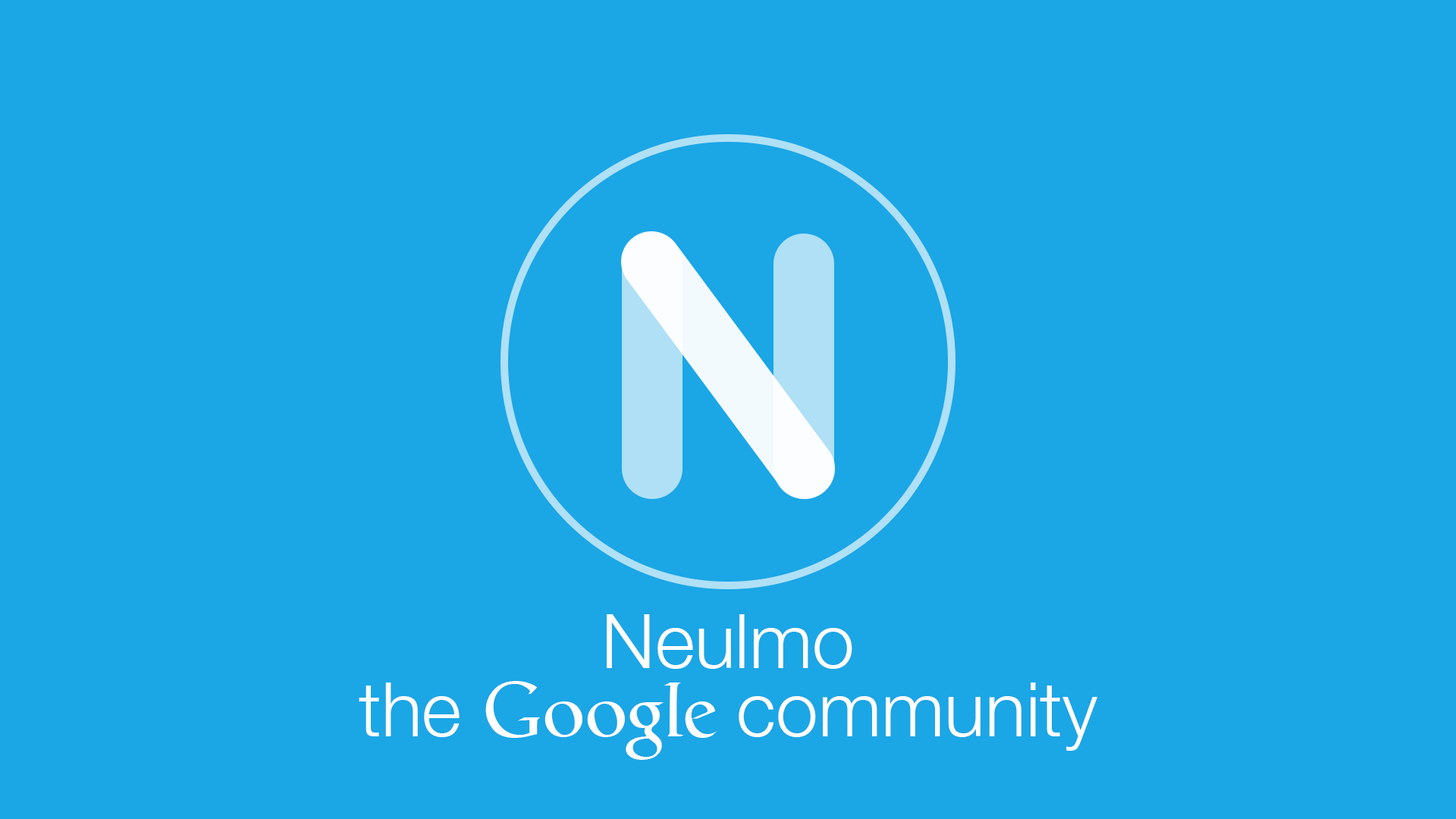
<style>
.page{position:relative;width:1456px;height:819px;background:#1ba6e6}
.page>*{position:absolute;margin:0}
.t1{font:75.8px/68.2px "HelveticaNeue-Light";color:#ffffff}
.t2{font:75.8px/68.2px "Catull-Regular";color:#ffffff}
</style>
<div class="page">
<p class="t1" style="left:359px;top:614px;width:739px;height:146px;text-align:center">Neulmo<br>the <span class="t2">Google </span>community</p>
</div>
